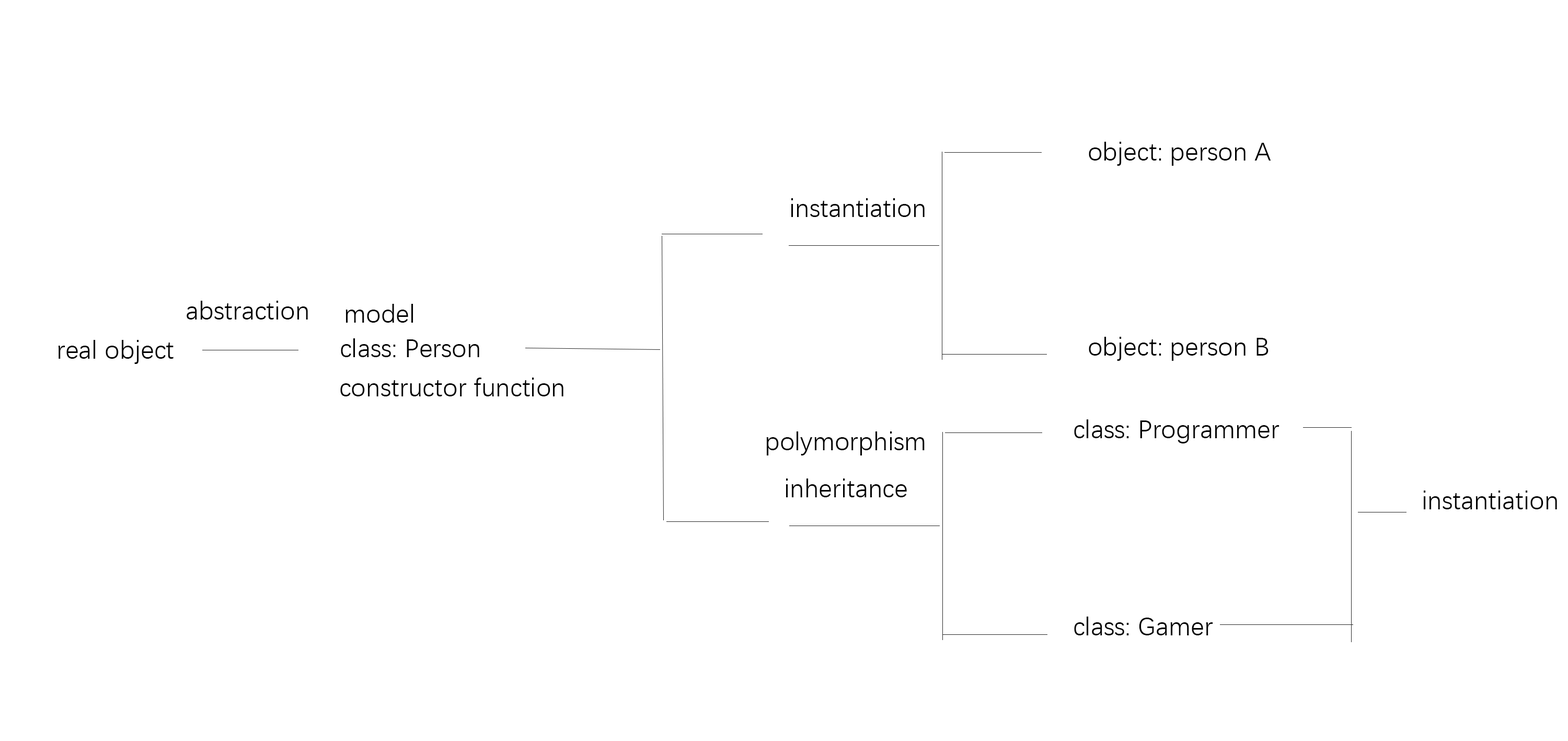
<style>
.page{position:relative;width:1568px;height:741px;background:#ffffff}
.page>*{position:absolute;margin:0}
.t1{font:26.1px "DengXian";color:#000000}
</style>
<div class="page">
<p class="t1" style="left:1089px;top:142px;width:182px;height:24px">object: person A</p>
<p class="t1" style="left:791px;top:198px;width:134px;height:19px">instantiation</p>
<p class="t1" style="left:187px;top:301px;width:121px;height:18px">abstraction</p>
<p class="t1" style="left:345px;top:304px;width:68px;height:18px">model</p>
<p class="t1" style="left:58px;top:340px;width:116px;height:24px">real object</p>
<p class="t1" style="left:341px;top:338px;width:138px;height:19px">class: Person</p>
<p class="t1" style="left:1089px;top:337px;width:180px;height:24px">object: person B</p>
<p class="t1" style="left:340px;top:377px;width:223px;height:19px">constructor function</p>
<p class="t1" style="left:1074px;top:419px;width:205px;height:24px">class: Programmer</p>
<p class="t1" style="left:766px;top:431px;width:159px;height:24px">polymorphism</p>
<p class="t1" style="left:786px;top:478px;width:121px;height:19px">inheritance</p>
<p class="t1" style="left:1424px;top:490px;width:133px;height:19px">instantiation</p>
<p class="t1" style="left:1074px;top:616px;width:139px;height:19px">class: Gamer</p>
</div>
